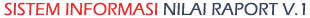
<style>
.page{position:relative;width:310px;height:18px;background:#ffffff}
.page>*{position:absolute;margin:0}
.t1{font:18px "ErasITC-Medium";color:#e03030}
.t2{font:18px "ErasITC-Medium";color:#3a445c}
</style>
<div class="page">
<p class="t1" style="left:4px;top:2px;width:302px;height:14px">SISTEM INFORMASI <span class="t2">NILAI RAPORT V.1</span></p>
</div>
